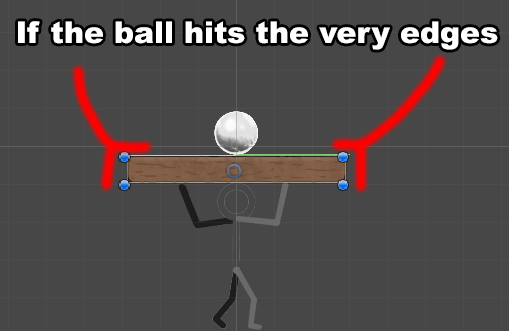
<style>
.page{position:relative;width:509px;height:331px;background:#474747}
.page>*{position:absolute;margin:0}
.t1{font:30px "Arial-Black";color:#ffffff}
</style>
<div class="page">
<p class="t1" style="left:18px;top:21px;width:480px;height:29px">If the ball hits the very edges</p>
</div>
